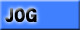
<style>
.page{position:relative;width:80px;height:30px;background:#4080ff}
.page>*{position:absolute;margin:0}
.t1{font:18px "GothicXB-HM"}
</style>
<div class="page">
<p class="t1" style="left:5px;top:8px;width:32px;height:14px">JOG</p>
</div>
